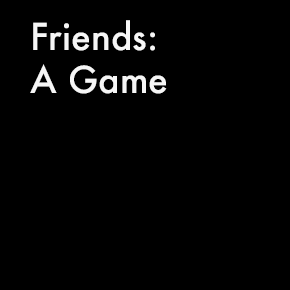
<style>
.page{position:relative;width:290px;height:290px;background:#000000}
.page>*{position:absolute;margin:0}
.t1{font:36px "Futura-Medium";color:#f6f6f6}
</style>
<div class="page">
<p class="t1" style="left:30px;top:20px;width:137px;height:74px">Friends:<br>A Game</p>
</div>
